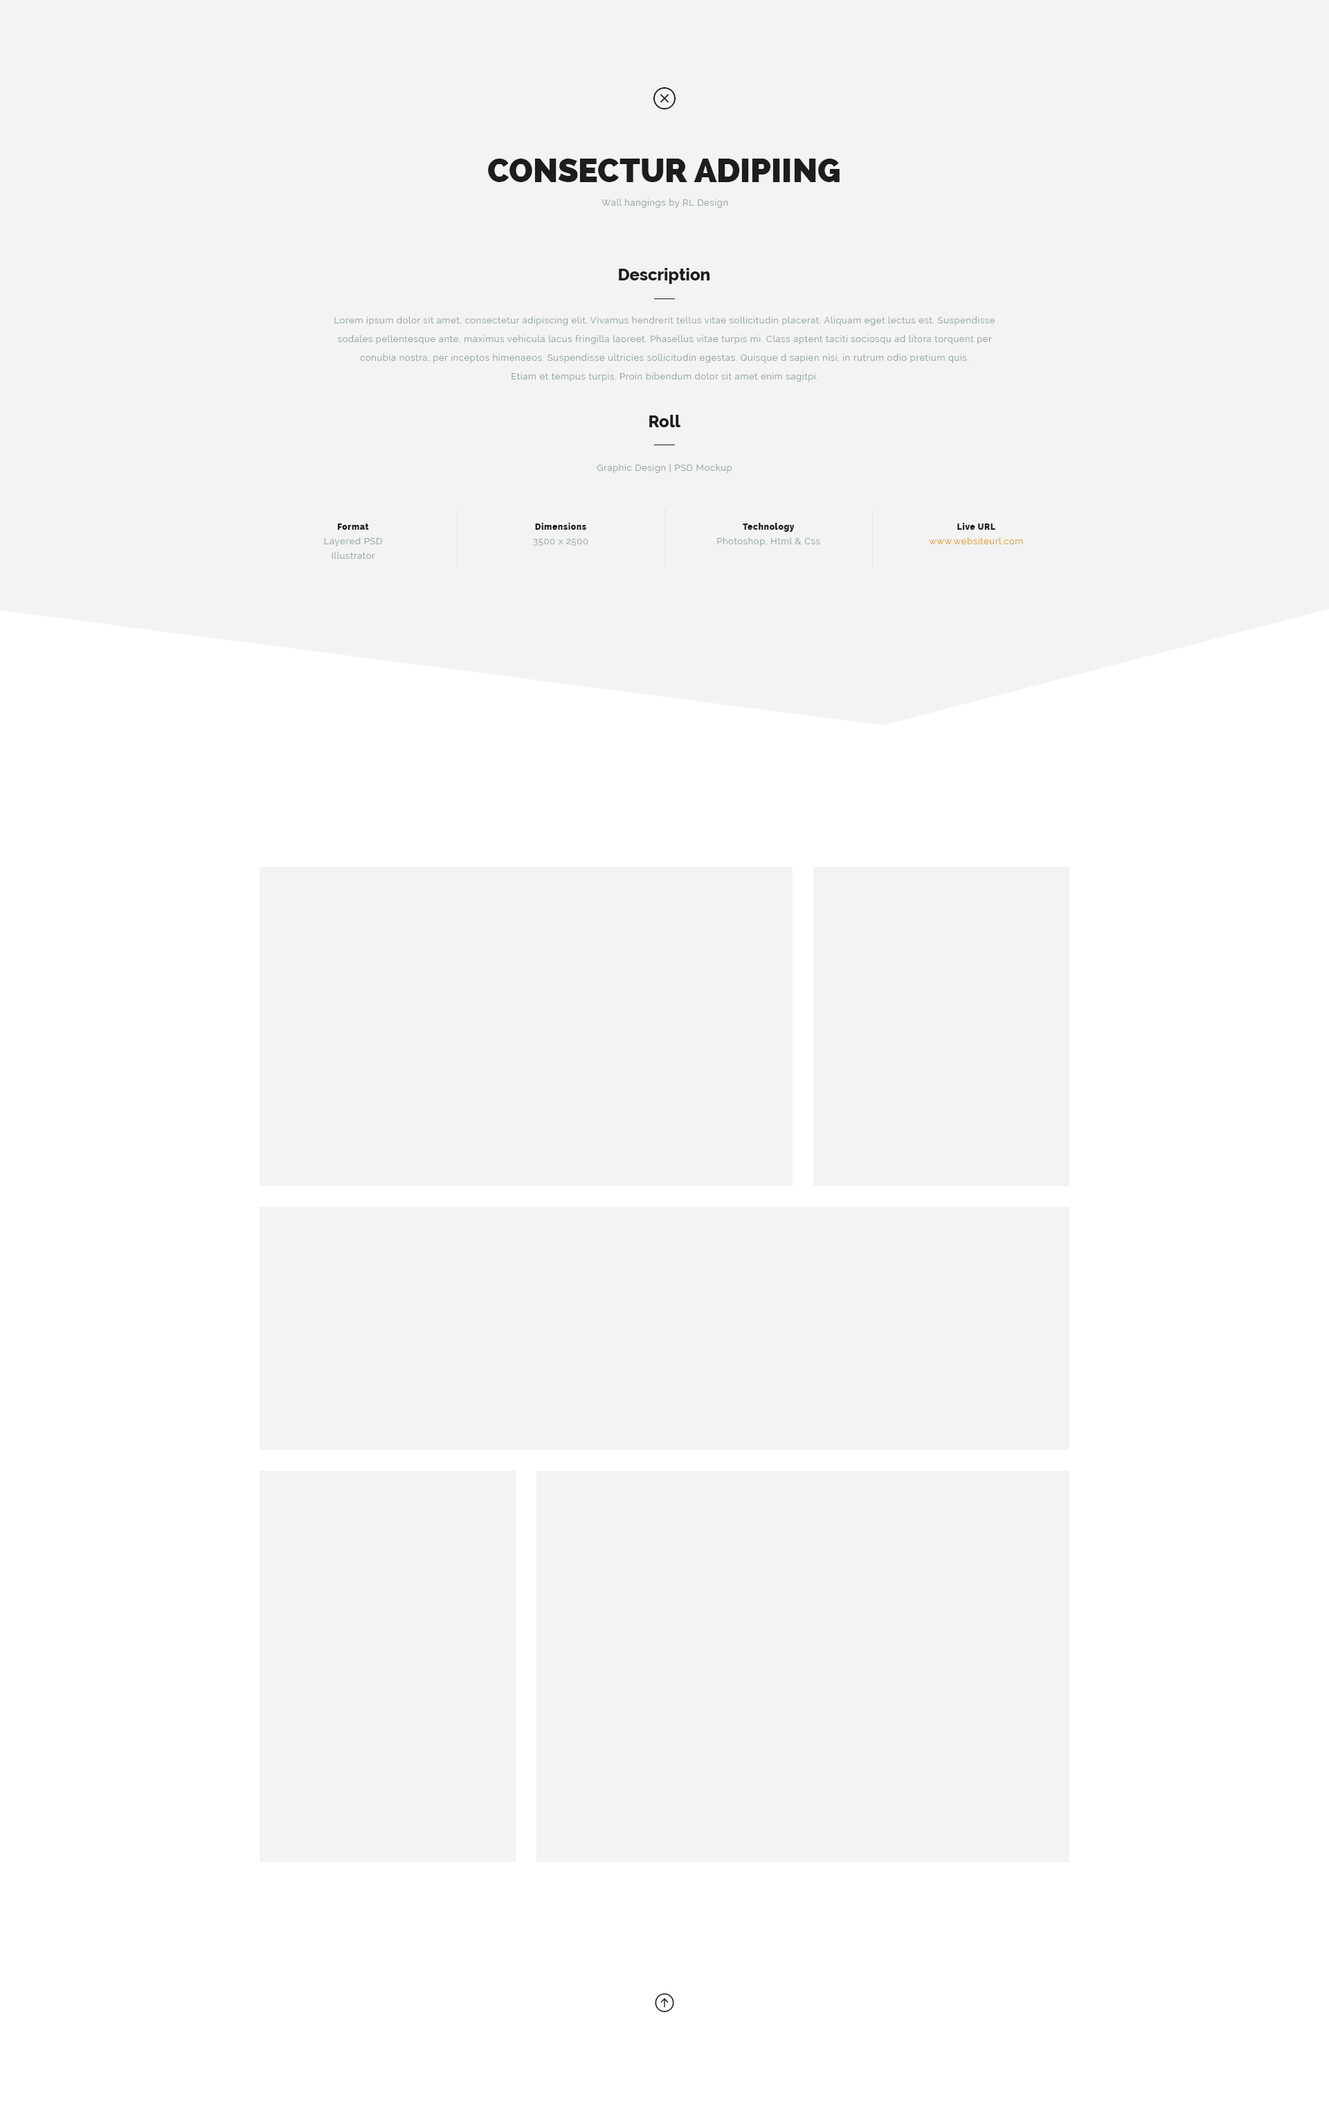
<style>
.page{position:relative;width:1329px;height:2121px;background:#f3f3f3}
.page>*{position:absolute;margin:0}
.t1{font:33.2px "Raleway-Heavy";color:#1d1d1f;text-transform:uppercase}
.t2{font:9px "Raleway";letter-spacing:0.05em;color:#95a5a6}
.t3{font:16.6px "Raleway-ExtraBold";color:#1d1d1f}
.t4{font:9px/18.7px "Raleway";letter-spacing:0.05em;color:#95a5a6}
.t5{font:9px/14.5px "Raleway";letter-spacing:0.05em;color:#95a5a6}
.t6{font:8.3px/14.5px "Raleway-Heavy";letter-spacing:0.05em;color:#1d1d1f}
.t7{font:9px/14.5px "Raleway";letter-spacing:0.05em;color:#e29e29}
</style>
<div class="page">
<p class="t1" style="left:488px;top:159px;width:352px;height:23px">Consectur Adipiing</p>
<p class="t2" style="left:602px;top:199px;width:126px;height:9px">Wall hangings by RL Design</p>
<p class="t3" style="left:619px;top:268px;width:91px;height:16px">Description</p>
<p class="t4" style="left:334px;top:316px;width:662px;height:65px;text-align:center">Lorem ipsum dolor sit amet, consectetur adipiscing elit. Vivamus hendrerit tellus vitae sollicitudin placerat. Aliquam eget lectus est. Suspendisse sodales pellentesque ante, maximus vehicula lacus fringilla laoreet. Phasellus vitae turpis mi. Class aptent taciti sociosqu ad litora torquent per conubia nostra, per inceptos himenaeos. Suspendisse ultricies sollicitudin egestas. Quisque d sapien nisi, in rutrum odio pretium quis.<br>Etiam et tempus turpis. Proin bibendum dolor sit amet enim sagitpi.</p>
<p class="t3" style="left:649px;top:415px;width:32px;height:12px">Roll</p>
<p class="t2" style="left:597px;top:464px;width:135px;height:9px">Graphic Design | PSD Mockup</p>
<p class="t5" style="left:324px;top:523px;width:58px;height:36px;text-align:center"><span class="t6">Format<br></span>Layered PSD<br>Illustrator</p>
<p class="t5" style="left:533px;top:523px;width:55px;height:23px;text-align:center"><span class="t6">Dimensions<br></span>3500 x 2500</p>
<p class="t5" style="left:717px;top:523px;width:103px;height:23px;text-align:center"><span class="t6">Technology<br></span>Photoshop, Html &amp; Css</p>
<p class="t7" style="left:929px;top:523px;width:94px;height:21px;text-align:center"><span class="t6">Live URL<br></span>www.websiteurl.com</p>
</div>
